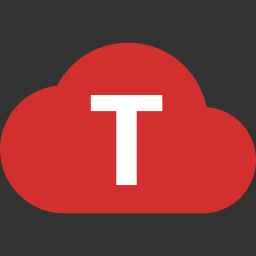
<style>
.page{position:relative;width:256px;height:256px;background:#333333}
.page>*{position:absolute;margin:0}
.t1{font:128px "MicrosoftTaiLe-Bold";color:#ffffff}
</style>
<div class="page">
<p class="t1" style="left:90px;top:95px;width:73px;height:90px">T</p>
</div>
